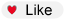
<style>
.page{position:relative;width:65px;height:20px;background:#f2f2f2}
.page>*{position:absolute;margin:0}
.t1{font:14.6px "ArialMT";letter-spacing:0.01em;color:#000000}
</style>
<div class="page">
<p class="t1" style="left:26px;top:4px;width:26px;height:12px">Like</p>
</div>
